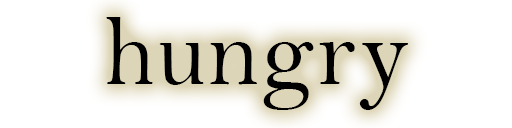
<style>
.page{position:relative;width:512px;height:128px;background:#ffffff}
.page>*{position:absolute;margin:0}
.t1{font:100px "BellMT";color:#000000}
</style>
<div class="page">
<p class="t1" style="left:106px;top:17px;width:303px;height:93px">hungry</p>
</div>
